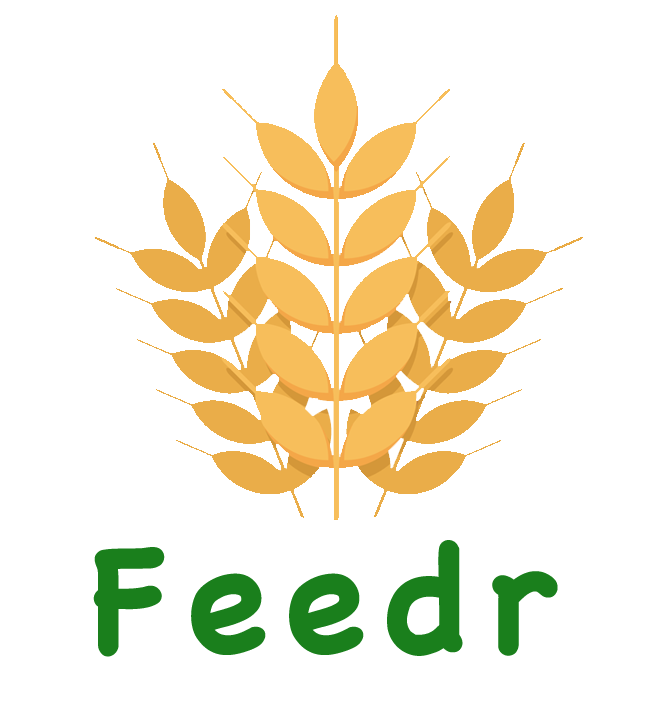
<style>
.page{position:relative;width:652px;height:720px;background:#ffffff}
.page>*{position:absolute;margin:0}
.t1{font:150px "Chalkboard-Bold";letter-spacing:0.105em;color:#1a7f1c}
</style>
<div class="page">
<p class="t1" style="left:93px;top:540px;width:465px;height:117px">Feedr</p>
</div>
